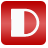
<style>
.page{position:relative;width:48px;height:48px}
.page>*{position:absolute;margin:0}
.t1{font:40px "Broadway";color:#f9fbfc;font-weight:bold}
</style>
<div class="page">
<p class="t1" style="left:11px;top:8px;width:29px;height:29px">D</p>
</div>
